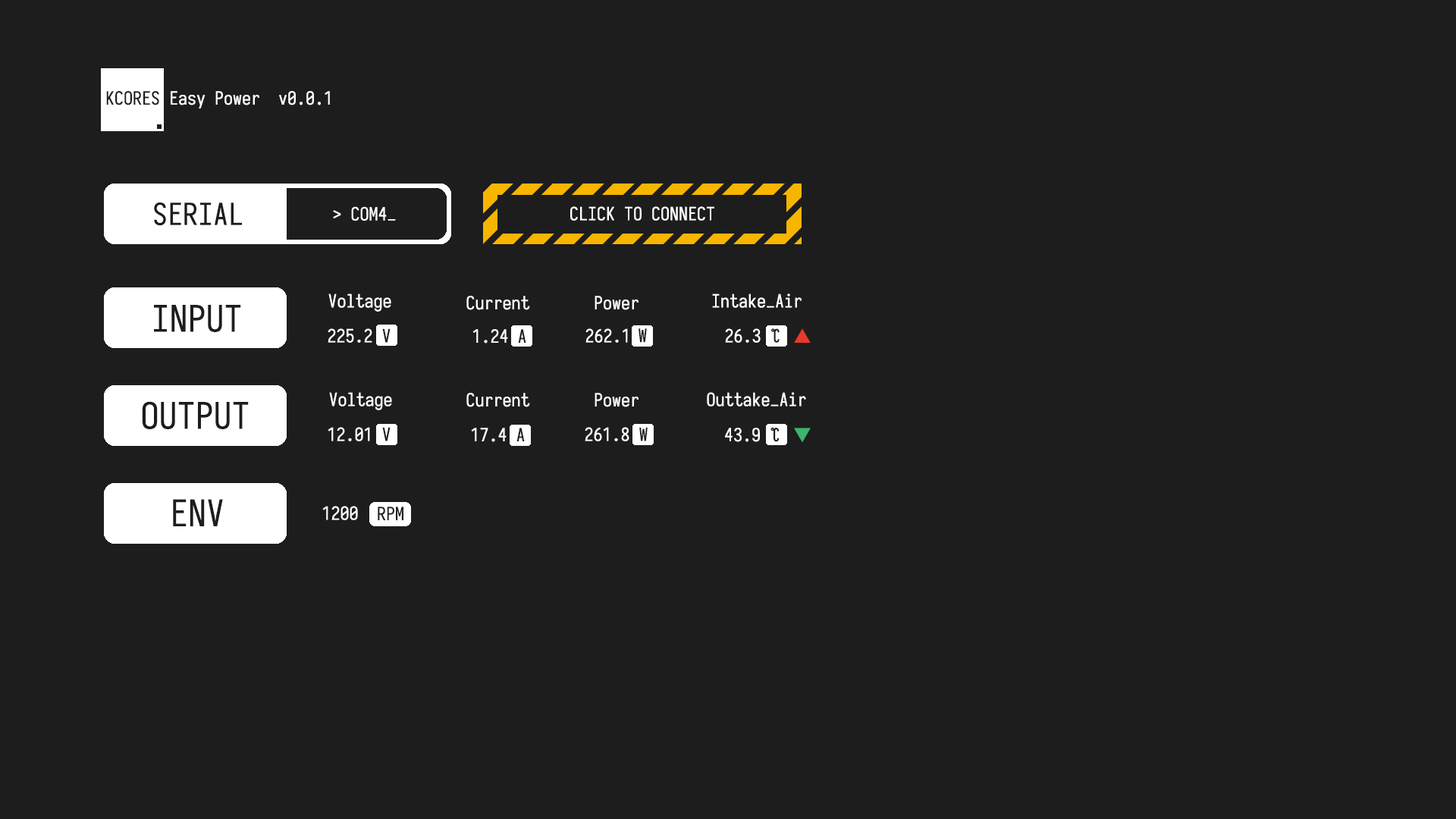
<style>
.page{position:relative;width:1456px;height:819px;background:#1d1d1d}
.page>*{position:absolute;margin:0}
.t1{font:18.2px "Sarasa-Mono-SC-Regular";color:#ffffff}
.t2{font:18.2px "Sarasa-Mono-SC-Regular";color:#1d1d1d}
.t3{font:30.3px "Sarasa-Mono-SC-Regular";color:#1d1d1d}
.t4{font:36.4px "Sarasa-Mono-SC-Regular";color:#1d1d1d}
.t5{font:18.2px "Sarasa-Mono-SC-Regular";color:#e83929}
.t6{font:18.2px "Sarasa-Mono-SC-Regular";color:#3eb370}
</style>
<div class="page">
<p class="t1" style="left:106px;top:91px;width:224px;height:17px"><span class="t2">KCORES</span> Easy Power  v0.0.1</p>
<p class="t3" style="left:154px;top:202px;width:88px;height:24px">SERIAL</p>
<p class="t1" style="left:333px;top:206px;width:63px;height:15px">&gt; COM4_</p>
<p class="t1" style="left:570px;top:206px;width:144px;height:15px">CLICK TO CONNECT</p>
<p class="t1" style="left:328px;top:293px;width:63px;height:19px">Voltage</p>
<p class="t1" style="left:712px;top:293px;width:90px;height:15px">Intake_Air</p>
<p class="t4" style="left:154px;top:305px;width:87px;height:27px">INPUT</p>
<p class="t1" style="left:466px;top:296px;width:64px;height:14px">Current</p>
<p class="t1" style="left:595px;top:296px;width:44px;height:14px">Power</p>
<p class="t1" style="left:328px;top:328px;width:63px;height:15px">225.2 <span class="t2">V</span></p>
<p class="t1" style="left:472px;top:329px;width:54px;height:15px">1.24 <span class="t2">A</span></p>
<p class="t1" style="left:585px;top:328px;width:63px;height:15px">262.1 <span class="t2">W</span></p>
<p class="t2" style="left:639px;top:328px;width:8px;height:15px">W</p>
<p class="t1" style="left:725px;top:328px;width:55px;height:15px">26.3 <span class="t2">℃</span></p>
<p class="t5" style="left:794px;top:328px;width:17px;height:15px">▲</p>
<p class="t4" style="left:142px;top:401px;width:107px;height:28px">OUTPUT</p>
<p class="t1" style="left:329px;top:392px;width:63px;height:18px">Voltage</p>
<p class="t1" style="left:466px;top:393px;width:64px;height:14px">Current</p>
<p class="t1" style="left:595px;top:393px;width:44px;height:14px">Power</p>
<p class="t1" style="left:707px;top:392px;width:99px;height:14px">Outtake_Air</p>
<p class="t1" style="left:328px;top:427px;width:63px;height:14px">12.01 <span class="t2">V</span></p>
<p class="t1" style="left:585px;top:427px;width:63px;height:14px">261.8<span class="t2"> W</span></p>
<p class="t1" style="left:725px;top:427px;width:55px;height:15px">43.9 <span class="t2">℃</span></p>
<p class="t6" style="left:794px;top:428px;width:17px;height:14px">▼</p>
<p class="t4" style="left:173px;top:499px;width:50px;height:27px">ENV</p>
<p class="t1" style="left:322px;top:506px;width:36px;height:14px">1200</p>
<p class="t2" style="left:378px;top:507px;width:25px;height:13px">RPM</p>
</div>
